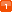
<style>
.page{position:relative;width:12px;height:12px;background:#f34f02}
.page>*{position:absolute;margin:0}
.t1{font:8px "Kroeger0553";color:#ffffff}
</style>
<div class="page">
<p class="t1" style="left:5px;top:4px;width:2px;height:5px">1</p>
</div>
